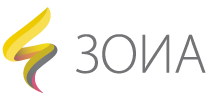
<style>
.page{position:relative;width:207px;height:100px;background:#ffffff}
.page>*{position:absolute;margin:0}
.t1{font:56.2px "MyriadPro-Light";color:#747477}
</style>
<div class="page">
<p class="t1" style="left:76px;top:34px;width:130px;height:40px">ЗОИА</p>
</div>
